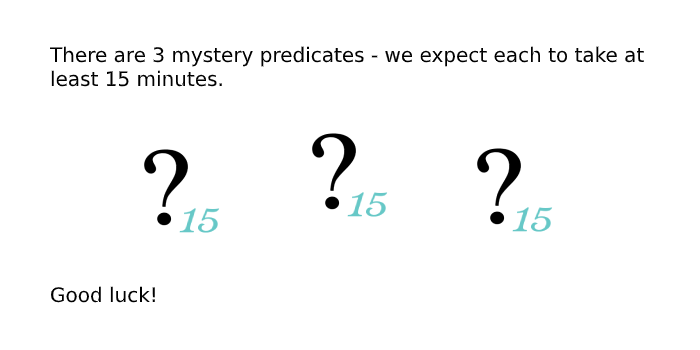
<style>
.page{position:relative;width:700px;height:350px;background:#ffffff}
.page>*{position:absolute;margin:0}
.t1{font:20px "DejaVuSans";color:#000000}
</style>
<div class="page">
<p class="t1" style="left:49px;top:46px;width:595px;height:257px">There are 3 mystery predicates - we expect each to take at<br>least 15 minutes.<br><br><br><br><br><br><br><br><br>Good luck!</p>
</div>
